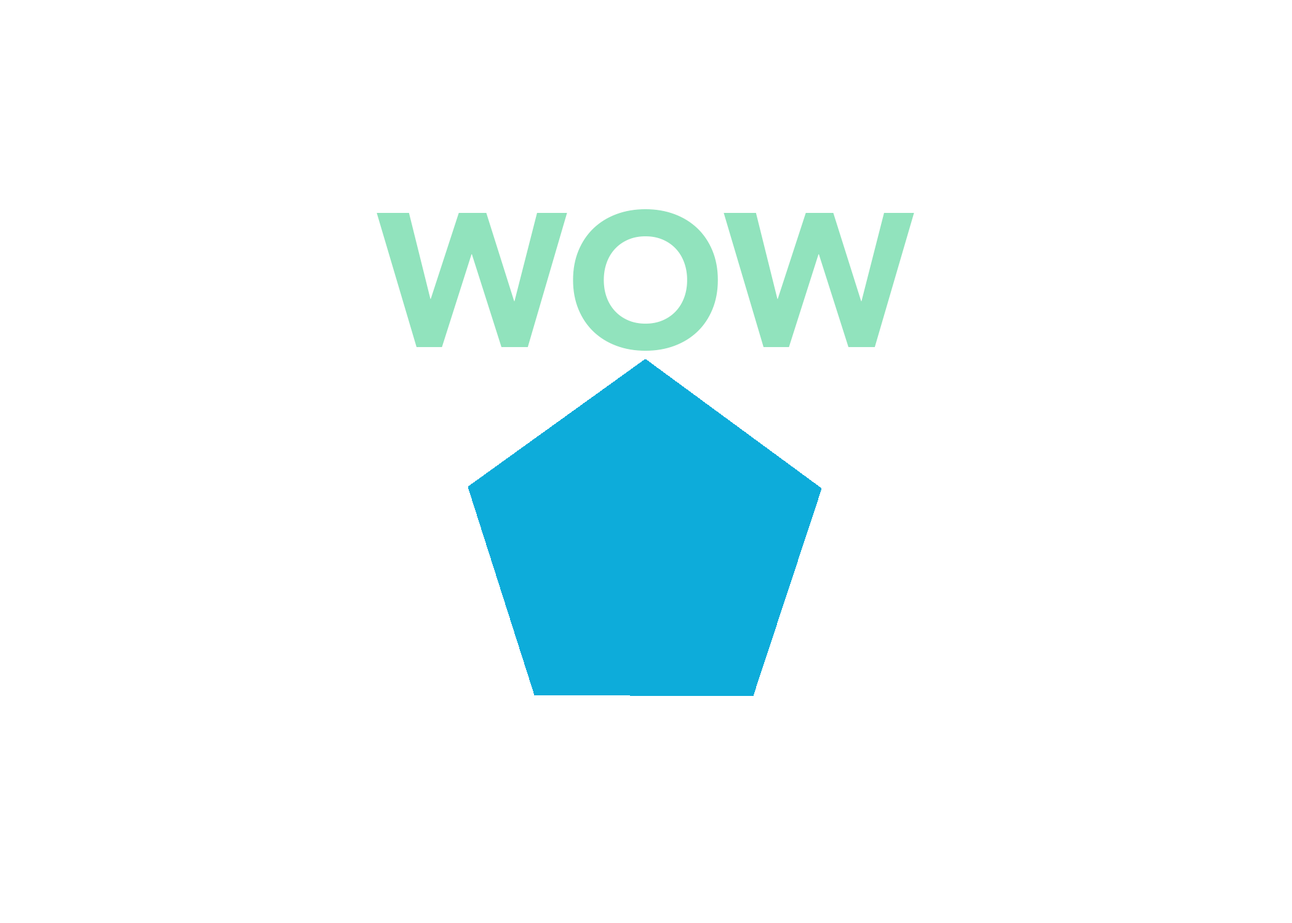
<style>
.page{position:relative;width:1292px;height:923px;background:#ffffff}
.page>*{position:absolute;margin:0}
.t1{font:189.7px "Avenir-Black";color:#91e3bd}
</style>
<div class="page">
<p class="t1" style="left:377px;top:209px;width:537px;height:142px">WOW</p>
</div>
